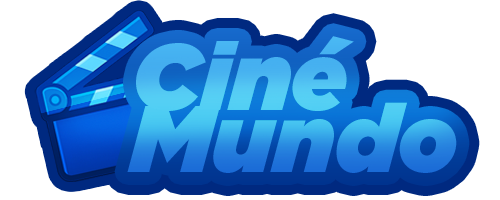
<style>
.page{position:relative;width:500px;height:200px;background:#ffffff}
.page>*{position:absolute;margin:0}
.t1{font:94.7px "Gotham-UltraItalic";color:#4dbbf2}
.t2{font:94.7px "Gotham-UltraItalic"}
</style>
<div class="page">
<p class="t1" style="left:136px;top:36px;width:218px;height:75px">Ciné</p>
<p class="t2" style="left:127px;top:102px;width:330px;height:71px">Mundo</p>
</div>
